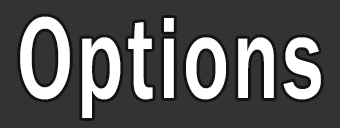
<style>
.page{position:relative;width:340px;height:128px;background:#333333}
.page>*{position:absolute;margin:0}
.t1{font:120px "FranklinGothic-Medium";letter-spacing:0.04em;color:#ffffff;scale:0.72 1}
</style>
<div class="page">
<p class="t1" style="left:20px;top:16px;width:301px;height:102px">Options</p>
</div>
